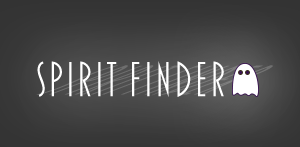
<style>
.page{position:relative;width:300px;height:147px}
.page>*{position:absolute;margin:0}
.t1{font:49.9px "Blakely-Light";color:#ffffff}
</style>
<div class="page">
<p class="t1" style="left:37px;top:61px;width:187px;height:36px">Spirit Finder</p>
</div>
